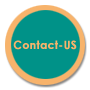
<style>
.page{position:relative;width:90px;height:90px;background:#009288}
.page>*{position:absolute;margin:0}
.t1{font:11px "CenturyGothic-Bold";color:#f7b36b;font-weight:bold}
</style>
<div class="page">
<p class="t1" style="left:13px;top:40px;width:64px;height:10px">Contact-US</p>
</div>
